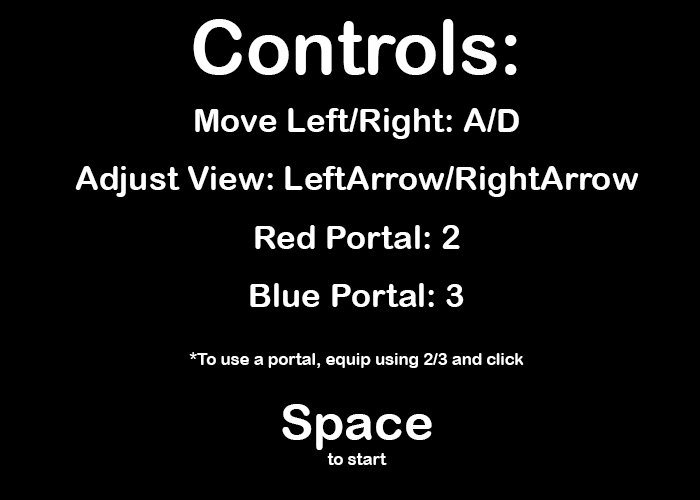
<style>
.page{position:relative;width:700px;height:500px;background:#000000}
.page>*{position:absolute;margin:0}
.t1{font:33.3px/58.3px "ArialRoundedMTBold";color:#ffffff}
.t2{font:75px/58.3px "ArialRoundedMTBold";color:#ffffff}
.t3{font:16.7px/58.3px "ArialRoundedMTBold";color:#ffffff}
.t4{font:50px/25px "ArialRoundedMTBold";color:#ffffff}
.t5{font:16.7px/25px "ArialRoundedMTBold";color:#ffffff}
</style>
<div class="page">
<p class="t1" style="left:75px;top:19px;width:564px;height:446px;text-align:center"><span class="t2">Controls:<br></span>Move Left/Right: A/D<br>Adjust View: LeftArrow/RightArrow<br>Red Portal: 2<br>Blue Portal: 3<br><span class="t3">*To use a portal, equip using 2/3 and click<br></span><span class="t4"><br><br>Space<br></span><span class="t5">to start</span></p>
</div>
